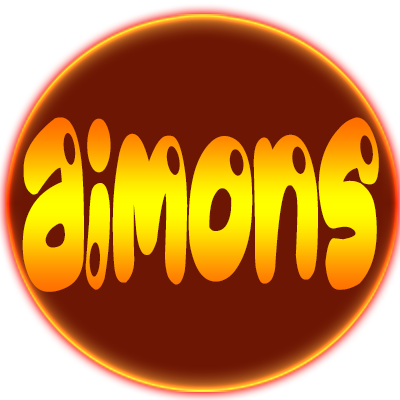
<style>
.page{position:relative;width:400px;height:400px;background:#6d1603}
.page>*{position:absolute;margin:0}
.t1{font:179.7px "JuicyFruity";scale:0.41 1}
</style>
<div class="page">
<p class="t1" style="left:22px;top:117px;width:357px;height:175px">aimons</p>
</div>
